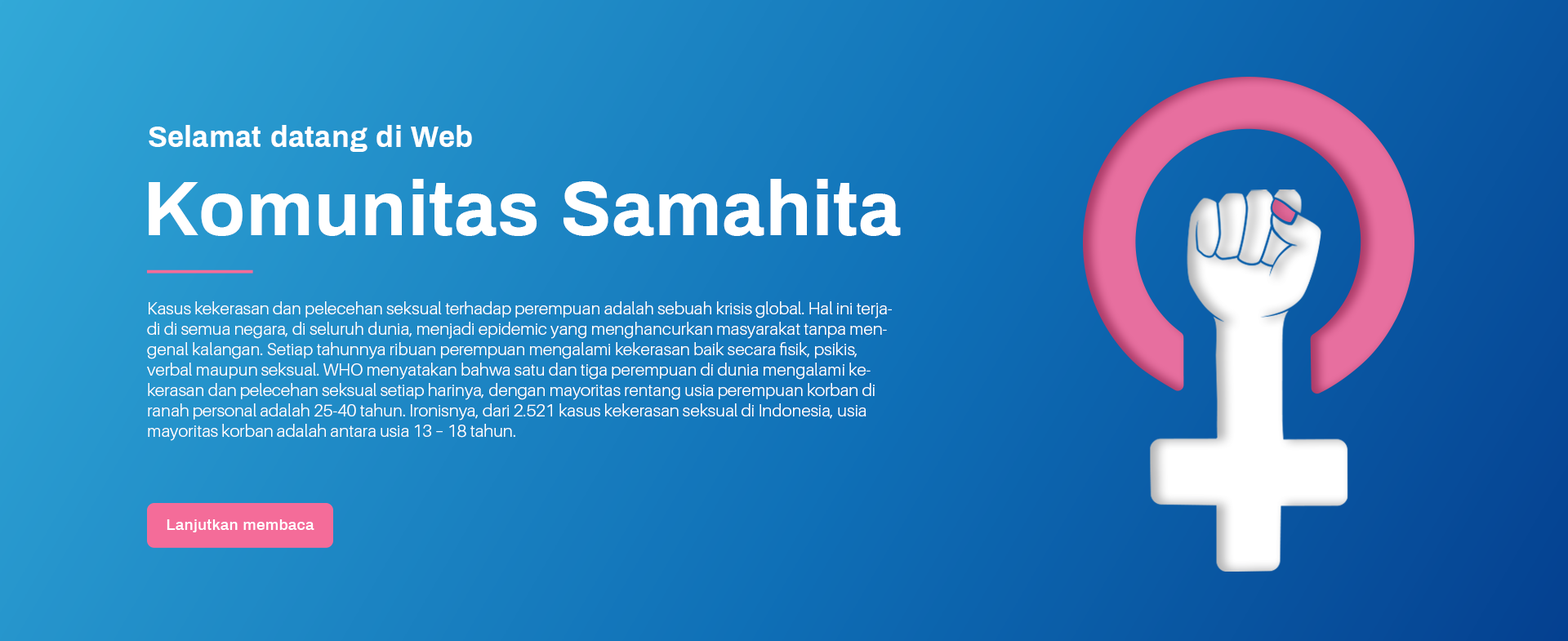
<style>
.page{position:relative;width:1568px;height:641px}
.page>*{position:absolute;margin:0}
.t1{font:29.8px "Archivo-Bold";color:#ffffff}
.t2{font:76.6px "Archivo-Bold";color:#ffffff}
.t3{font:17px "Aileron-Light";color:#ffffff}
</style>
<div class="page">
<p class="t1" style="left:149px;top:125px;width:323px;height:27px">Selamat datang di Web</p>
<p class="t2" style="left:149px;top:179px;width:752px;height:57px">Komunitas Samahita</p>
<p class="t3" style="left:147px;top:301px;width:745px;height:140px">Kasus kekerasan dan pelecehan seksual terhadap perempuan adalah sebuah krisis global. Hal ini terjadi di semua negara, di seluruh dunia, menjadi epidemic yang menghancurkan masyarakat tanpa mengenal kalangan. Setiap tahunnya ribuan perempuan mengalami kekerasan baik secara fisik, psikis, verbal maupun seksual. WHO menyatakan bahwa satu dan tiga perempuan di dunia mengalami kekerasan dan pelecehan seksual setiap harinya, dengan mayoritas rentang usia perempuan korban di ranah personal adalah 25-40 tahun. Ironisnya, dari 2.521 kasus kekerasan seksual di Indonesia, usia mayoritas korban adalah antara usia 13 – 18 tahun.</p>
</div>
